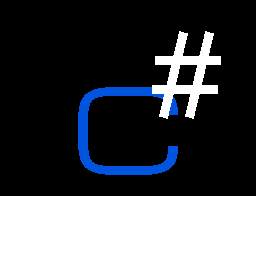
<style>
.page{position:relative;width:256px;height:256px;background:#000000}
.page>*{position:absolute;margin:0}
.t1{font:112px "Michroma";color:#ffffff}
.t2{font:112px "Michroma";color:#0054df}
</style>
<div class="page">
<p class="t1" style="left:152px;top:31px;width:69px;height:88px">#</p>
<p class="t2" style="left:78px;top:87px;width:100px;height:88px">C</p>
</div>
